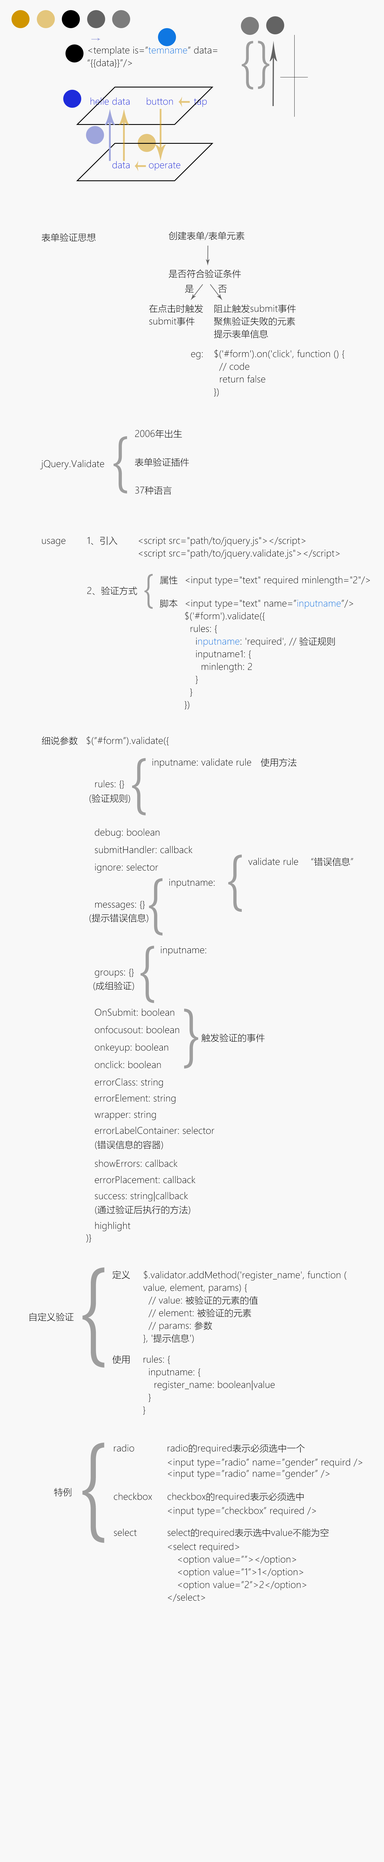
<style>
.page{position:relative;width:384px;height:1862px;background:#f8f8f8}
.page>*{position:absolute;margin:0}
.t1{font:52.2px "MicrosoftYaHeiLight";letter-spacing:0.01em;color:#9e9e9e}
.t2{font:51.8px "MicrosoftYaHeiLight";letter-spacing:0.01em;color:#9e9e9e}
.t3{font:9px/12.7px "MicrosoftYaHeiLight";letter-spacing:0.01em;color:#000000}
.t4{font:9px/12.7px "MicrosoftYaHeiLight";letter-spacing:0.01em;color:#0f77e2}
.t5{font:9px "MicrosoftYaHeiLight";letter-spacing:0.01em;color:#1e2bdb}
.t6{font:9px "MicrosoftYaHeiLight";letter-spacing:0.01em;color:#000000}
.t7{font:61.6px "MicrosoftYaHeiLight";letter-spacing:0.01em;color:#9e9e9e}
.t8{font:37.5px "MicrosoftYaHeiLight";letter-spacing:0.01em;color:#9e9e9e}
.t9{font:64.4px "MicrosoftYaHeiLight";letter-spacing:0.01em;color:#9e9e9e}
.t10{font:107.8px "MicrosoftYaHeiLight";letter-spacing:0.01em;color:#9e9e9e;scale:0.93 1}
.t11{font:107.9px "MicrosoftYaHeiLight";letter-spacing:0.01em;color:#9e9e9e;scale:0.93 1}
</style>
<div class="page">
<p class="t1" style="left:242px;top:41px;width:11px;height:48px">{</p>
<p class="t2" style="left:258px;top:41px;width:11px;height:48px;rotate:180deg">{</p>
<p class="t3" style="left:87px;top:46px;width:130px;height:22px">&lt;template is=”<span class="t4">temname</span>” data=<br>“{{data}}”/&gt;</p>
<p class="t5" style="left:91px;top:97px;width:39px;height:8px">helle data</p>
<p class="t5" style="left:147px;top:97px;width:26px;height:8px">button</p>
<p class="t5" style="left:194px;top:98px;width:13px;height:9px">tap</p>
<p class="t5" style="left:113px;top:161px;width:17px;height:8px">data</p>
<p class="t5" style="left:149px;top:162px;width:32px;height:8px">operate</p>
<p class="t6" style="left:42px;top:233px;width:54px;height:9px">表单验证思想</p>
<p class="t6" style="left:169px;top:231px;width:76px;height:9px">创建表单/表单元素</p>
<p class="t6" style="left:169px;top:269px;width:72px;height:9px">是否符合验证条件</p>
<p class="t6" style="left:185px;top:285px;width:9px;height:8px">是</p>
<p class="t6" style="left:218px;top:285px;width:9px;height:8px">否</p>
<p class="t3" style="left:149px;top:304px;width:54px;height:22px">在点击时触发<br>submit事件</p>
<p class="t3" style="left:214px;top:304px;width:82px;height:34px">阻止触发submit事件<br>聚焦验证失败的元素<br>提示表单信息</p>
<p class="t6" style="left:191px;top:352px;width:12px;height:8px">eg:</p>
<p class="t3" style="left:214px;top:349px;width:131px;height:48px">$('#form').on('click', function () {<br>  // code<br>  return false<br>})</p>
<p class="t7" style="left:114px;top:436px;width:13px;height:57px">{</p>
<p class="t6" style="left:135px;top:429px;width:47px;height:9px">2006年出生</p>
<p class="t6" style="left:40px;top:460px;width:64px;height:9px">jQuery.Validate</p>
<p class="t6" style="left:135px;top:458px;width:54px;height:8px">表单验证插件</p>
<p class="t6" style="left:135px;top:486px;width:37px;height:9px">37种语言</p>
<p class="t6" style="left:42px;top:539px;width:24px;height:7px">usage</p>
<p class="t6" style="left:87px;top:536px;width:31px;height:9px">1、引入</p>
<p class="t3" style="left:139px;top:536px;width:201px;height:23px">&lt;script src="path/to/jquery.js"&gt;&lt;/script&gt;<br>&lt;script src="path/to/jquery.validate.js"&gt;&lt;/script&gt;</p>
<p class="t8" style="left:144px;top:574px;width:9px;height:35px">{</p>
<p class="t6" style="left:160px;top:576px;width:18px;height:8px">属性</p>
<p class="t6" style="left:186px;top:576px;width:184px;height:9px">&lt;input type="text" required minlength="2"/&gt;</p>
<p class="t6" style="left:87px;top:586px;width:50px;height:9px">2、验证方式</p>
<p class="t6" style="left:160px;top:599px;width:18px;height:9px">脚本</p>
<p class="t3" style="left:185px;top:599px;width:169px;height:110px">&lt;input type="text" name=”<span class="t4">inputname</span>”/&gt;<br>$('#form').validate({<br>  rules: {<br>    i<span class="t4">nputname</span>: 'required', // 验证规则<br>    inputname1: {<br>      minlength: 2<br>    }<br>  }<br>})</p>
<p class="t6" style="left:42px;top:736px;width:36px;height:9px">细说参数</p>
<p class="t6" style="left:87px;top:736px;width:82px;height:9px">$(”#form”).validate({</p>
<p class="t7" style="left:132px;top:758px;width:14px;height:57px">{</p>
<p class="t6" style="left:152px;top:758px;width:99px;height:10px">inputname: validate rule</p>
<p class="t6" style="left:261px;top:758px;width:36px;height:9px">使用方法</p>
<p class="t6" style="left:95px;top:780px;width:29px;height:9px">rules: {}</p>
<p class="t6" style="left:89px;top:794px;width:41px;height:9px">(验证规则)</p>
<p class="t6" style="left:95px;top:828px;width:65px;height:10px">debug: boolean</p>
<p class="t6" style="left:95px;top:846px;width:98px;height:7px">submitHandler: callback</p>
<p class="t7" style="left:228px;top:854px;width:14px;height:58px">{</p>
<p class="t6" style="left:248px;top:857px;width:50px;height:8px">validate rule</p>
<p class="t6" style="left:311px;top:857px;width:43px;height:9px">“错误信息”</p>
<p class="t6" style="left:95px;top:863px;width:63px;height:10px">ignore: selector</p>
<p class="t7" style="left:149px;top:878px;width:14px;height:57px">{</p>
<p class="t6" style="left:169px;top:879px;width:46px;height:9px">inputname:</p>
<p class="t6" style="left:95px;top:900px;width:50px;height:10px">messages: {}</p>
<p class="t6" style="left:89px;top:913px;width:60px;height:10px">(提示错误信息)</p>
<p class="t7" style="left:141px;top:945px;width:13px;height:58px">{</p>
<p class="t6" style="left:161px;top:946px;width:45px;height:9px">inputname:</p>
<p class="t6" style="left:95px;top:968px;width:39px;height:10px">groups: {}</p>
<p class="t6" style="left:93px;top:981px;width:41px;height:9px">(成组验证)</p>
<p class="t6" style="left:95px;top:1008px;width:79px;height:8px">OnSubmit: boolean</p>
<p class="t9" style="left:184px;top:1008px;width:14px;height:60px;rotate:180deg">{</p>
<p class="t6" style="left:95px;top:1026px;width:84px;height:7px">onfocusout: boolean</p>
<p class="t6" style="left:201px;top:1033px;width:64px;height:9px">触发验证的事件</p>
<p class="t6" style="left:95px;top:1043px;width:73px;height:10px">onkeyup: boolean</p>
<p class="t6" style="left:95px;top:1061px;width:66px;height:7px">onclick: boolean</p>
<p class="t6" style="left:95px;top:1078px;width:68px;height:10px">errorClass: string</p>
<p class="t6" style="left:95px;top:1094px;width:81px;height:10px">errorElement: string</p>
<p class="t6" style="left:95px;top:1111px;width:61px;height:9px">wrapper: string</p>
<p class="t6" style="left:95px;top:1126px;width:120px;height:8px">errorLabelContainer: selector</p>
<p class="t6" style="left:95px;top:1140px;width:68px;height:9px">(错误信息的容器)</p>
<p class="t6" style="left:95px;top:1159px;width:83px;height:8px">showErrors: callback</p>
<p class="t6" style="left:95px;top:1176px;width:101px;height:7px">errorPlacement: callback</p>
<p class="t6" style="left:95px;top:1191px;width:93px;height:10px">success: string|callback</p>
<p class="t6" style="left:95px;top:1205px;width:95px;height:9px">(通过验证后执行的方法)</p>
<p class="t6" style="left:95px;top:1221px;width:36px;height:10px">highlight</p>
<p class="t6" style="left:86px;top:1234px;width:5px;height:9px">)}</p>
<p class="t10" style="left:82px;top:1267px;width:23px;height:100px">{</p>
<p class="t6" style="left:113px;top:1270px;width:17px;height:9px">定义</p>
<p class="t3" style="left:143px;top:1270px;width:204px;height:73px">$.validator.addMethod('register_name', function (<br>value, element, params) {<br>  // value: 被验证的元素的值<br>  // element: 被验证的元素<br>  // params: 参数<br>}, '提示信息')</p>
<p class="t6" style="left:30px;top:1312px;width:44px;height:9px">自定义验证</p>
<p class="t6" style="left:113px;top:1355px;width:17px;height:8px">使用</p>
<p class="t3" style="left:143px;top:1355px;width:132px;height:60px">rules: {<br>  inputname: {<br>    register_name: boolean|value<br>  }<br>}</p>
<p class="t11" style="left:82px;top:1442px;width:22px;height:101px">{</p>
<p class="t6" style="left:114px;top:1444px;width:20px;height:8px">radio</p>
<p class="t6" style="left:168px;top:1444px;width:137px;height:10px">radio的required表示必须选中一个</p>
<p class="t6" style="left:168px;top:1458px;width:195px;height:10px">&lt;input type=”radio” name=”gender” requird /&gt;</p>
<p class="t6" style="left:168px;top:1469px;width:162px;height:10px">&lt;input type=”radio” name=”gender” /&gt;</p>
<p class="t6" style="left:54px;top:1488px;width:17px;height:8px">特例</p>
<p class="t6" style="left:114px;top:1492px;width:38px;height:8px">checkbox</p>
<p class="t6" style="left:168px;top:1492px;width:136px;height:10px">checkbox的required表示必须选中</p>
<p class="t6" style="left:168px;top:1506px;width:148px;height:10px">&lt;input type=”checkbox” required /&gt;</p>
<p class="t6" style="left:114px;top:1528px;width:23px;height:8px">select</p>
<p class="t6" style="left:168px;top:1528px;width:161px;height:10px">select的required表示选中value不能为空</p>
<p class="t3" style="left:168px;top:1542px;width:139px;height:59px">&lt;select required&gt;<br> &lt;option value=””&gt;&lt;/option&gt;<br> &lt;option value=”1”&gt;1&lt;/option&gt;<br> &lt;option value=”2”&gt;2&lt;/option&gt;<br>&lt;/select&gt;</p>
</div>
